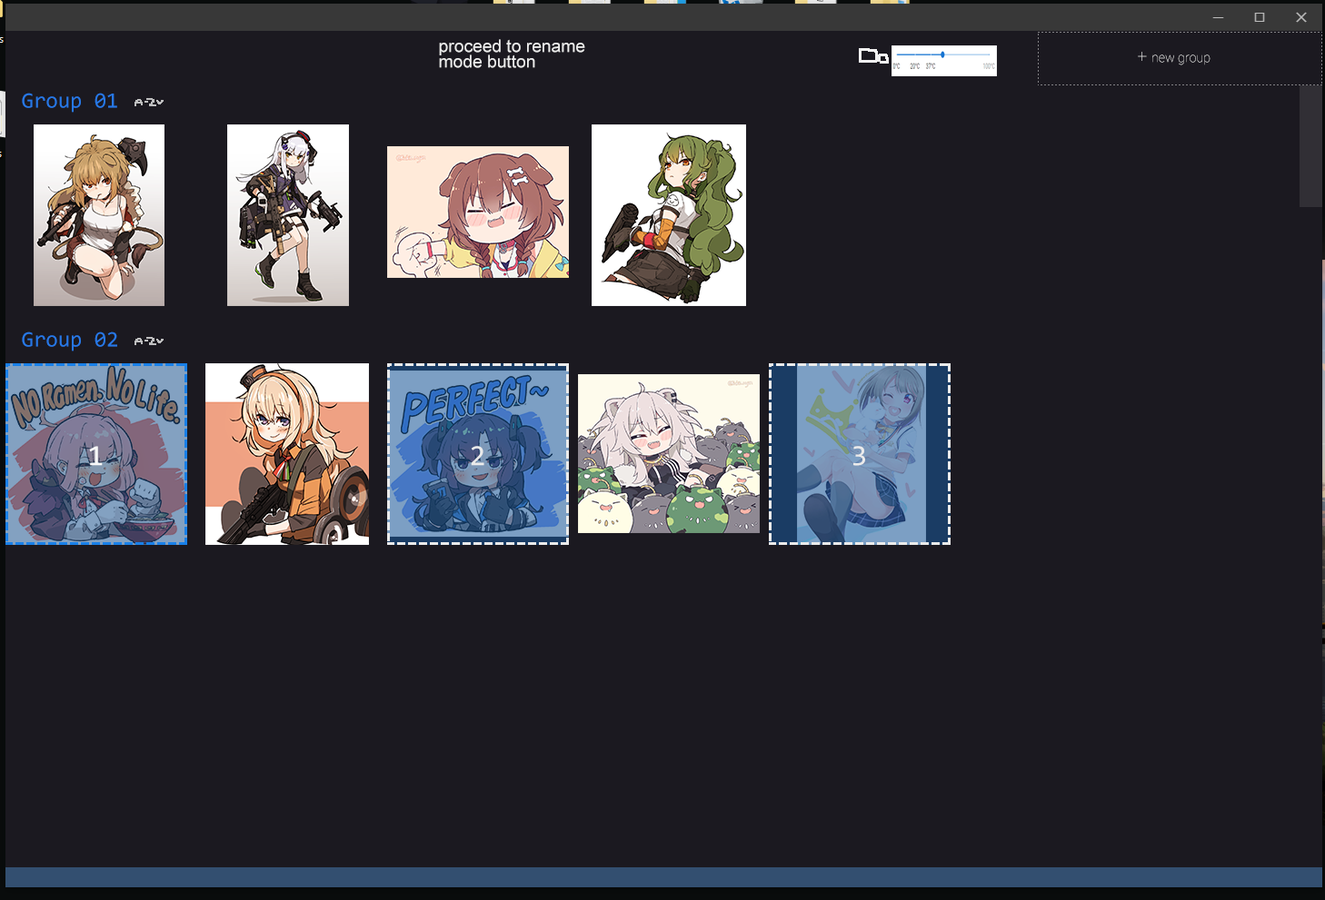
<style>
.page{position:relative;width:1325px;height:900px;background:#1b1920}
.page>*{position:absolute;margin:0}
.t1{font:17.5px/15.4px "ArialMT";color:#ececec}
.t2{font:12.9px "Roboto-Thin"}
.t3{font:17.5px "Roboto-Thin"}
.t4{font:22px "Consolas";color:#2778e6}
.t5{font:29.5px "Consolas";color:#f8f8f8}
.t6{font:29.5px "Consolas";color:#ebebeb}
</style>
<div class="page">
<p class="t1" style="left:439px;top:39px;width:146px;height:29px">proceed to rename<br>mode button</p>
<p class="t2" style="left:1137px;top:52px;width:73px;height:13px"><span class="t3">+ </span>new group</p>
<p class="t4" style="left:22px;top:93px;width:95px;height:20px">Group 01</p>
<p class="t4" style="left:22px;top:332px;width:95px;height:20px">Group 02</p>
<p class="t5" style="left:89px;top:446px;width:14px;height:20px">1</p>
<p class="t6" style="left:471px;top:446px;width:13px;height:20px">2</p>
<p class="t6" style="left:853px;top:446px;width:12px;height:20px">3</p>
</div>
